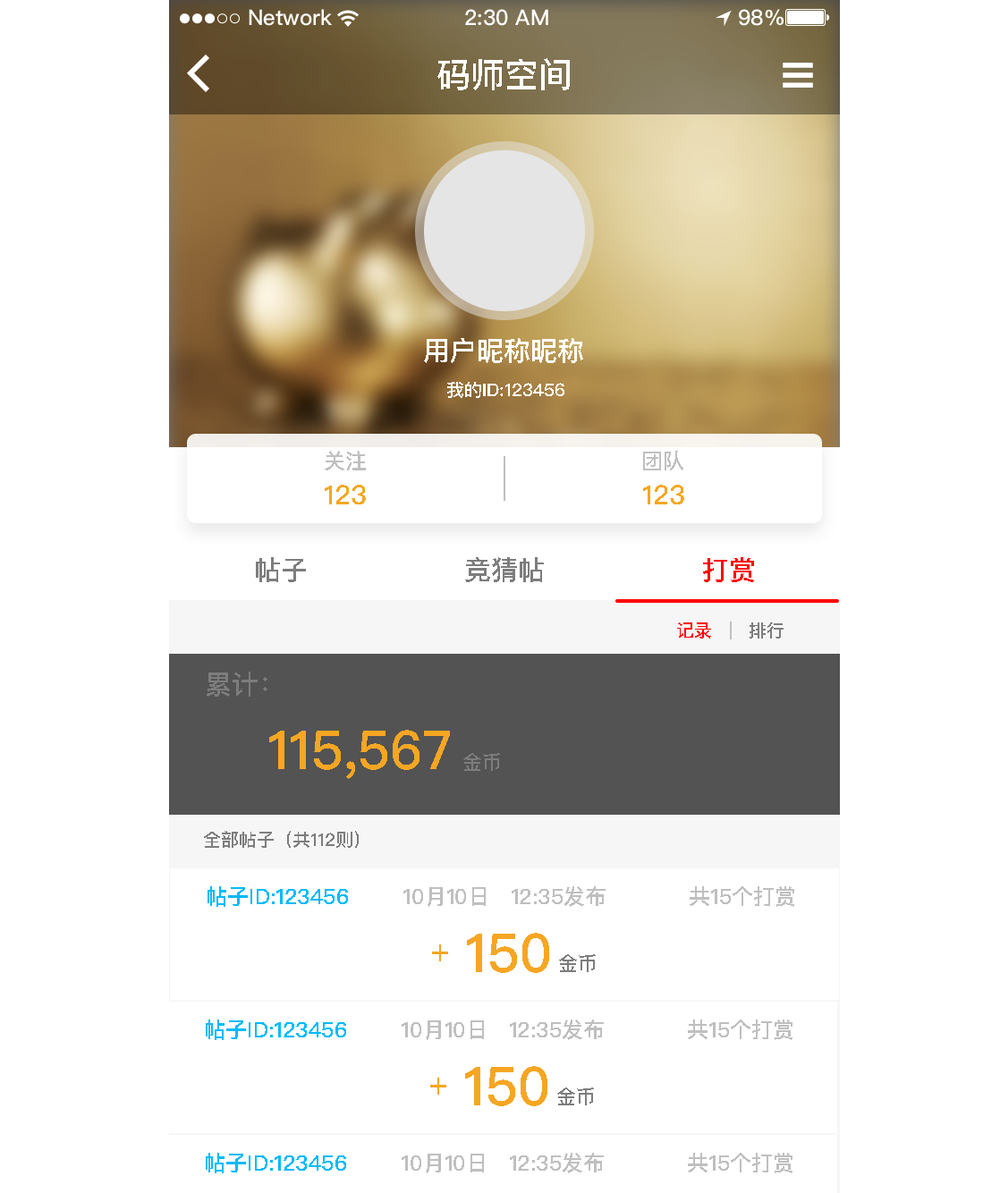
<style>
.page{position:relative;width:1000px;height:1193px;background:#ffffff}
.page>*{position:absolute;margin:0}
.t1{font:34px "PingFangSC-Medium";color:#ffffff;text-transform:uppercase}
.t2{font:26.8px "PingFangSC-Medium";color:#ffffff;text-transform:uppercase}
.t3{font:17.9px "PingFangSC-Medium";color:#ffffff;text-transform:uppercase}
.t4{font:21.5px "PingFangSC-Medium";color:#bfbfbf;text-transform:uppercase}
.t5{font:26.8px "PingFangSC-Medium";color:#f6a623;text-transform:uppercase}
.t6{font:26.8px "PingFangSC-Medium";color:#7d7d7d;text-transform:uppercase}
.t7{font:26.8px "PingFangSC-Medium";color:#ff0000;text-transform:uppercase}
.t8{font:17.9px "PingFangSC-Medium";color:#ff0000;text-transform:uppercase}
.t9{font:17.9px "PingFangSC-Medium";color:#7d7d7d;text-transform:uppercase}
.t10{font:53.6px "PingFangSC-Medium";color:#f6a623;text-transform:uppercase}
.t11{font:19.7px "PingFangSC-Medium";color:#7d7d7d;text-transform:uppercase}
.t12{font:21.5px "PingFangSC-Medium";color:#01b9fd;text-transform:uppercase}
.t13{font:21.5px "PingFangSC-Medium";color:#01b9fd}
</style>
<div class="page">
<p class="t1" style="left:437px;top:58px;width:133px;height:32px">码师空间</p>
<p class="t2" style="left:424px;top:338px;width:159px;height:25px">用户昵称昵称</p>
<p class="t3" style="left:447px;top:382px;width:117px;height:16px">我的id:123456</p>
<p class="t4" style="left:325px;top:451px;width:41px;height:19px">关注</p>
<p class="t4" style="left:643px;top:451px;width:40px;height:19px">团队</p>
<p class="t5" style="left:325px;top:485px;width:41px;height:19px">123</p>
<p class="t5" style="left:643px;top:485px;width:41px;height:19px">123</p>
<p class="t6" style="left:256px;top:557px;width:50px;height:25px">帖子</p>
<p class="t6" style="left:465px;top:557px;width:79px;height:25px">竞猜帖</p>
<p class="t7" style="left:703px;top:557px;width:51px;height:25px">打赏</p>
<p class="t8" style="left:677px;top:622px;width:34px;height:16px">记录</p>
<p class="t9" style="left:749px;top:622px;width:34px;height:16px">排行</p>
<p class="t6" style="left:207px;top:672px;width:60px;height:25px">累计：</p>
<p class="t10" style="left:269px;top:730px;width:181px;height:49px">115,567</p>
<p class="t11" style="left:463px;top:753px;width:37px;height:18px">金币</p>
<p class="t9" style="left:204px;top:831px;width:155px;height:17px">全部帖子（共112则）</p>
<p class="t12" style="left:207px;top:886px;width:141px;height:21px">帖子<span class="t13">Ｉ</span>D:123456</p>
<p class="t4" style="left:403px;top:886px;width:202px;height:21px">10月10日   12:35发布</p>
<p class="t4" style="left:689px;top:886px;width:105px;height:21px">共15个打赏</p>
<p class="t10" style="left:467px;top:933px;width:82px;height:40px">150</p>
<p class="t5" style="left:432px;top:944px;width:16px;height:17px">＋</p>
<p class="t11" style="left:559px;top:954px;width:37px;height:18px">金币</p>
<p class="t12" style="left:206px;top:1019px;width:140px;height:21px">帖子<span class="t13">Ｉ</span>D:123456</p>
<p class="t4" style="left:401px;top:1019px;width:203px;height:21px">10月10日   12:35发布</p>
<p class="t4" style="left:688px;top:1019px;width:104px;height:21px">共15个打赏</p>
<p class="t10" style="left:465px;top:1066px;width:82px;height:40px">150</p>
<p class="t5" style="left:430px;top:1077px;width:16px;height:17px">＋</p>
<p class="t11" style="left:557px;top:1087px;width:37px;height:18px">金币</p>
<p class="t12" style="left:206px;top:1153px;width:140px;height:20px">帖子<span class="t13">Ｉ</span>D:123456</p>
<p class="t4" style="left:401px;top:1153px;width:203px;height:20px">10月10日   12:35发布</p>
<p class="t4" style="left:688px;top:1153px;width:104px;height:20px">共15个打赏</p>
</div>
